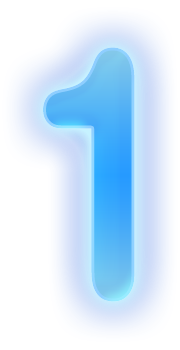
<style>
.page{position:relative;width:180px;height:350px;background:#ffffff}
.page>*{position:absolute;margin:0}
.t1{font:360px "AGBookRounded-Medium";letter-spacing:0.025em;scale:0.83 1}
</style>
<div class="page">
<p class="t1" style="left:43px;top:47px;width:92px;height:255px">1</p>
<p class="t1" style="left:43px;top:47px;width:92px;height:255px">1</p>
<p class="t1" style="left:43px;top:47px;width:92px;height:255px">1</p>
</div>
